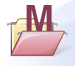
<style>
.page{position:relative;width:75px;height:66px;background:#ffffff}
.page>*{position:absolute;margin:0}
.t1{font:36px "Helvetica-Bold";color:#853c52}
</style>
<div class="page">
<p class="t1" style="left:26px;top:5px;width:26px;height:26px">M</p>
</div>
